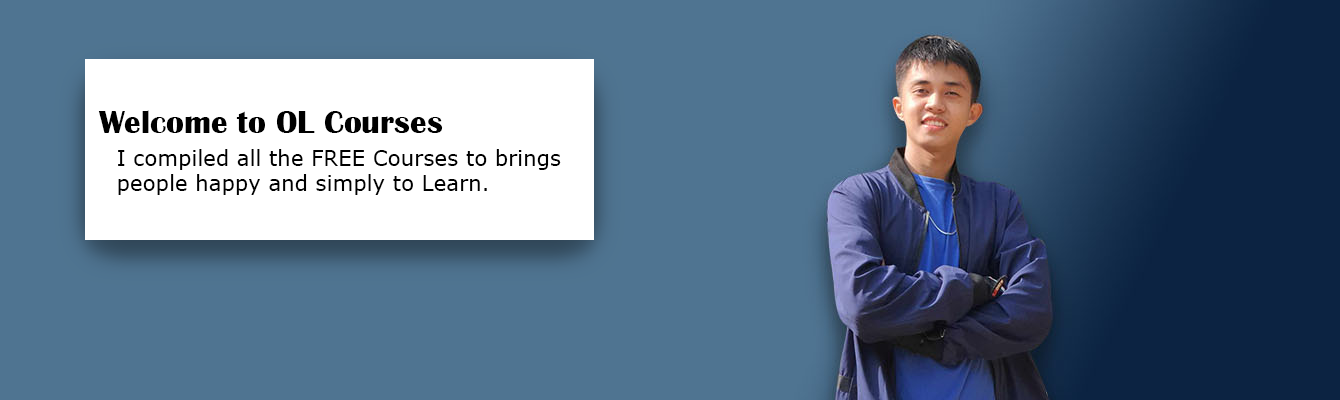
<style>
.page{position:relative;width:1340px;height:400px;background:#4f7491}
.page>*{position:absolute;margin:0}
.t1{font:33px "BritannicBold";color:#000000}
.t2{font:21.4px "MSReferenceSansSerif";color:#000000}
</style>
<div class="page">
<p class="t1" style="left:98px;top:110px;width:345px;height:23px">Welcome to OL Courses</p>
<p class="t2" style="left:118px;top:149px;width:443px;height:46px">I compiled all the FREE Courses to brings<br>people happy and simply to Learn.</p>
</div>
